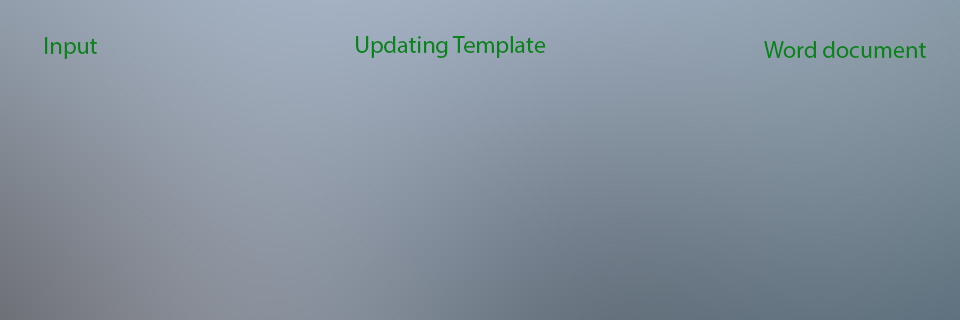
<style>
.page{position:relative;width:960px;height:320px}
.page>*{position:absolute;margin:0}
.t1{font:24px "MyriadPro-Regular";color:#07831a}
</style>
<div class="page">
<p class="t1" style="left:45px;top:37px;width:52px;height:22px">Input</p>
<p class="t1" style="left:356px;top:36px;width:190px;height:22px">Updating Template</p>
<p class="t1" style="left:764px;top:41px;width:162px;height:17px">Word document</p>
</div>
